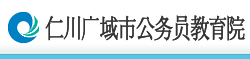
<style>
.page{position:relative;width:250px;height:59px;background:#ffffff}
.page>*{position:absolute;margin:0}
.t1{font:27.6px "Haansoft-Batang";letter-spacing:-0.1em;color:#333333;font-weight:bold;scale:0.71 1}
</style>
<div class="page">
<p class="t1" style="left:45px;top:15px;width:200px;height:26px">仁川广域市公务员教育院</p>
</div>
